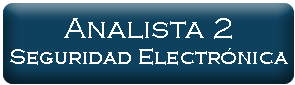
<style>
.page{position:relative;width:295px;height:85px;background:#0e415e}
.page>*{position:absolute;margin:0}
.t1{font:22px "CopperplateGothic-Light";color:#ffffff}
.t2{font:30px "CopperplateGothic-Light";color:#ffffff}
</style>
<div class="page">
<p class="t1" style="left:10px;top:18px;width:278px;height:47px;text-align:center"><span class="t2">Analista 2<br></span>Seguridad Electrónica</p>
<p class="t1" style="left:10px;top:18px;width:278px;height:47px;text-align:center"><span class="t2">Analista 2<br></span>Seguridad Electrónica</p>
</div>
